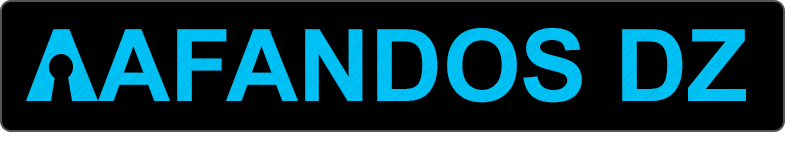
<style>
.page{position:relative;width:785px;height:145px;background:#000000}
.page>*{position:absolute;margin:0}
.t1{font:100px "Arial-BoldMT";color:#00c2f6}
</style>
<div class="page">
<p class="t1" style="left:26px;top:28px;width:720px;height:75px">AAFANDOS DZ</p>
</div>
